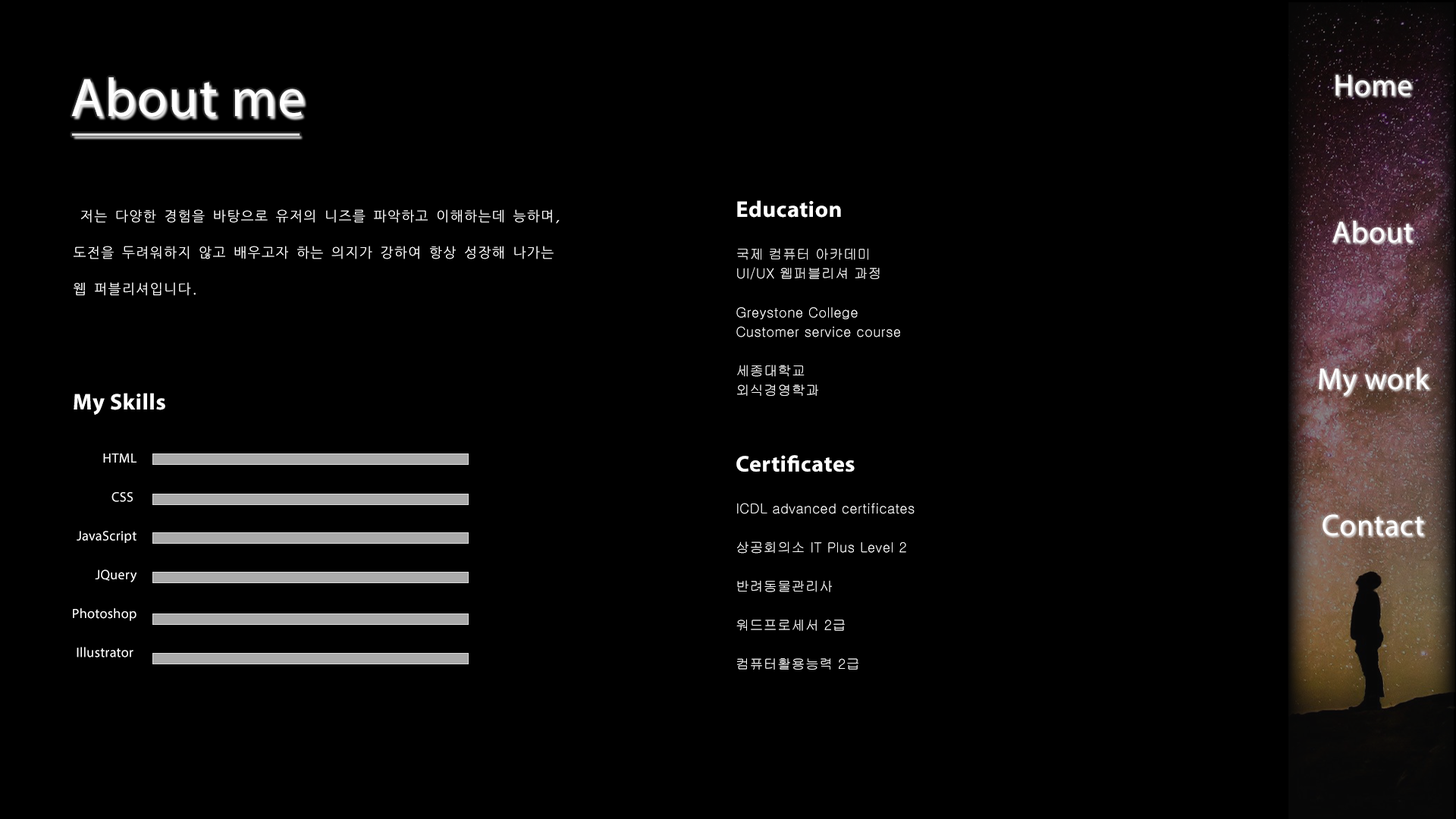
<style>
.page{position:relative;width:1456px;height:819px;background:#000000}
.page>*{position:absolute;margin:0}
.t1{font:54.6px "MyriadPro-Regular";letter-spacing:0.02em;color:#ffffff}
.t2{font:30.3px "MyriadPro-Regular";letter-spacing:0.02em;color:#ffffff}
.t3{font:13.6px/36.4px "NanumGothicCoding";letter-spacing:0.02em;color:#ffffff}
.t4{font:22.7px "MyriadPro-Bold";letter-spacing:0.02em;color:#ffffff}
.t5{font:13.6px/19.5px "Gulim";letter-spacing:0.02em;color:#ffffff}
.t6{font:22.8px "MyriadPro-Bold";letter-spacing:0.02em;color:#ffffff}
.t7{font:13.6px/19.4px "MyriadPro-Regular";letter-spacing:0.02em;color:#ffffff}
.t8{font:13.6px/19.4px "Gulim";letter-spacing:0.02em;color:#ffffff}
</style>
<div class="page">
<p class="t1" style="left:71px;top:77px;width:232px;height:40px">About me</p>
<p class="t2" style="left:1335px;top:74px;width:76px;height:22px">Home</p>
<p class="t3" style="left:74px;top:209px;width:486px;height:87px">저는 다양한 경험을 바탕으로 유저의 니즈를 파악하고 이해하는데 능하며,<br>도전을 두려워하지 않고 배우고자 하는 의지가 강하여 항상 성장해 나가는 <br>웹 퍼블리셔입니다.</p>
<p class="t4" style="left:737px;top:200px;width:104px;height:18px">Education</p>
<p class="t2" style="left:1332px;top:221px;width:81px;height:22px">About</p>
<p class="t5" style="left:736px;top:248px;width:164px;height:148px">국제 컴퓨터 아카데미<br>UI/UX 웹퍼블리셔 과정<br><br>Greystone College<br>Customer service course <br><br>세종대학교<br>외식경영학과</p>
<p class="t2" style="left:1319px;top:367px;width:110px;height:29px">My work</p>
<p class="t6" style="left:74px;top:393px;width:91px;height:22px">My Skills</p>
<p class="t7" style="left:73px;top:453px;width:64px;height:204px;text-align:right">HTML<br><br>CSS <br><br>JavaScript<br><br>JQuery<br><br>Photoshop<br><br>Illustrator</p>
<p class="t4" style="left:736px;top:455px;width:119px;height:17px">Certificates</p>
<p class="t8" style="left:736px;top:503px;width:179px;height:167px">ICDL advanced certificates<br><br>상공회의소 IT Plus Level 2<br><br>반려동물관리사<br><br>워드프로세서 2급<br><br>컴퓨터활용능력 2급</p>
<p class="t2" style="left:1323px;top:514px;width:101px;height:22px">Contact</p>
</div>
